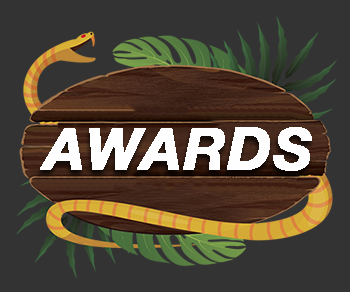
<style>
.page{position:relative;width:350px;height:292px;background:#333333}
.page>*{position:absolute;margin:0}
.t1{font:58.3px "HelveticaNeue-BoldItalic";letter-spacing:0.01em;color:#fffefe;font-weight:bold}
</style>
<div class="page">
<p class="t1" style="left:40px;top:127px;width:272px;height:44px">AWARDS</p>
</div>
